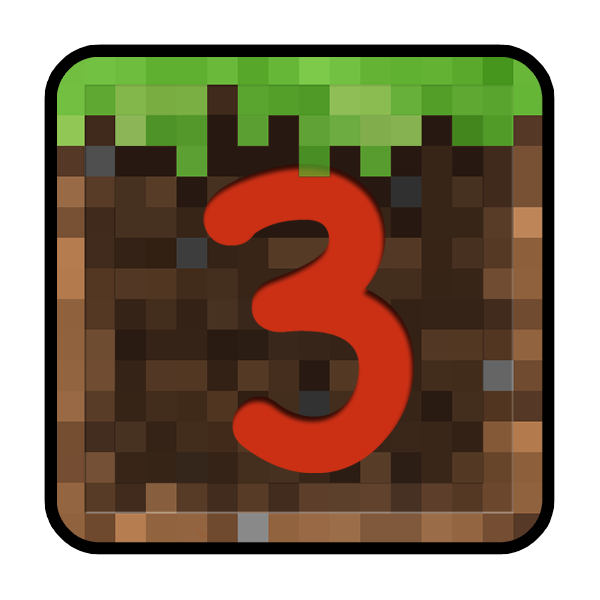
<style>
.page{position:relative;width:600px;height:600px;background:#ffffff}
.page>*{position:absolute;margin:0}
.t1{font:478.5px "AppleCasual";color:#cb3015}
</style>
<div class="page">
<p class="t1" style="left:203px;top:164px;width:212px;height:309px">3</p>
</div>
